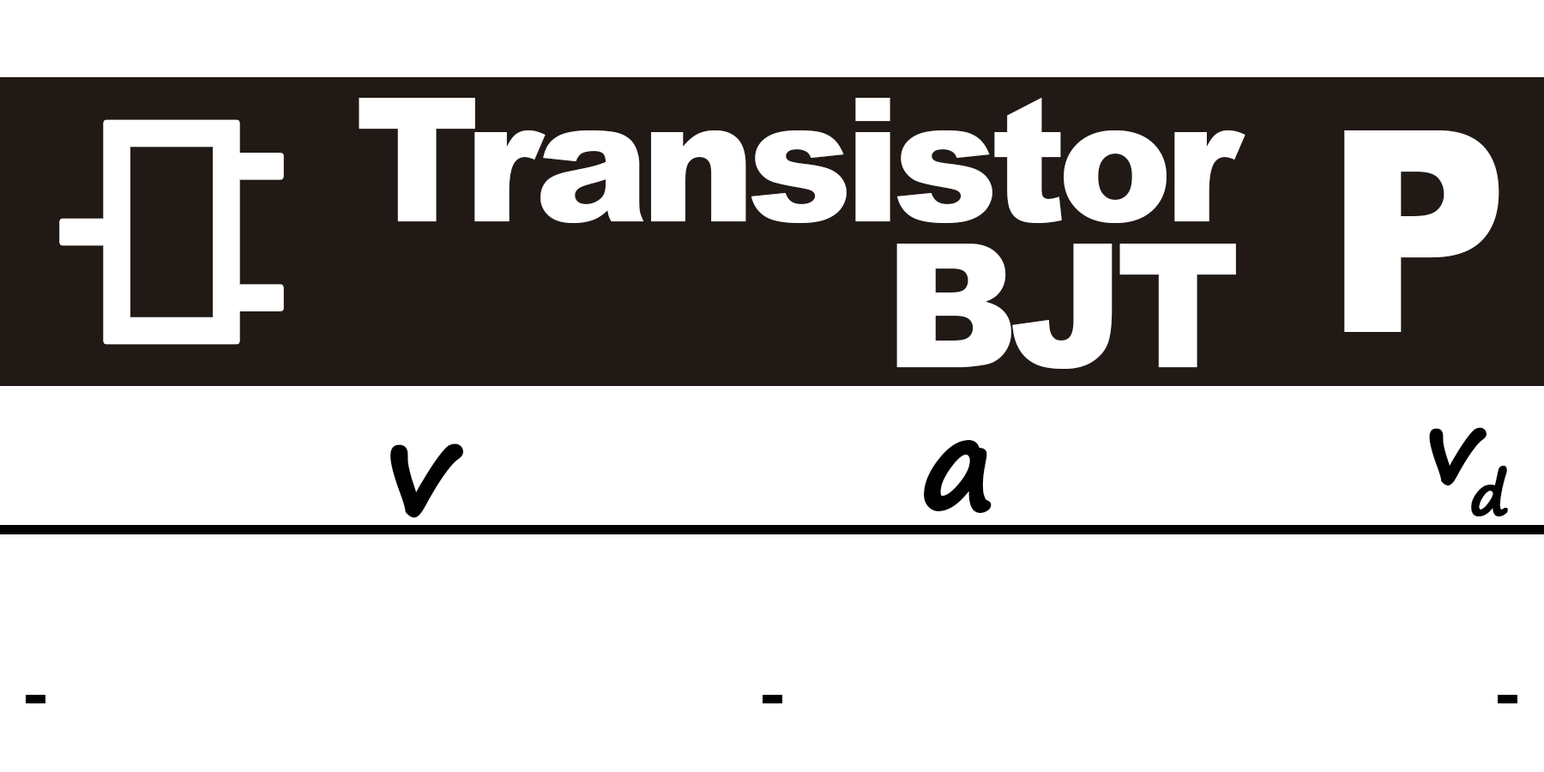
<style>
.page{position:relative;width:1544px;height:772px;background:#ffffff}
.page>*{position:absolute;margin:0}
.t1{font:172.5px/145.3px "Arial-Black";letter-spacing:-0.05em;color:#ffffff}
.t2{font:281.5px "Arial-Black";letter-spacing:-0.01em;color:#ffffff;scale:0.9 1}
.t3{font:99.9px "SegoePrint-Bold";letter-spacing:-0.15em;color:#010101;font-weight:bold}
.t4{font:127.1px "Arial-BoldMT";letter-spacing:-0.15em;color:#010101}
.t5{font:127.1px "SegoePrint-Bold";letter-spacing:-0.01em;color:#010101;font-weight:bold}
.t6{font:127.1px "Arial-BoldMT";letter-spacing:-0.01em;color:#010101}
</style>
<div class="page">
<p class="t1" style="left:359px;top:98px;width:887px;height:271px;text-align:right">Transistor<br>BJT</p>
<p class="t2" style="left:1344px;top:130px;width:156px;height:202px">P</p>
<p class="t3" style="left:1429px;top:427px;width:79px;height:89px"><span class="t4"> </span>vd</p>
<p class="t5" style="left:390px;top:444px;width:74px;height:74px">v</p>
<p class="t5" style="left:924px;top:439px;width:68px;height:75px"><span class="t6">   </span>a</p>
</div>
